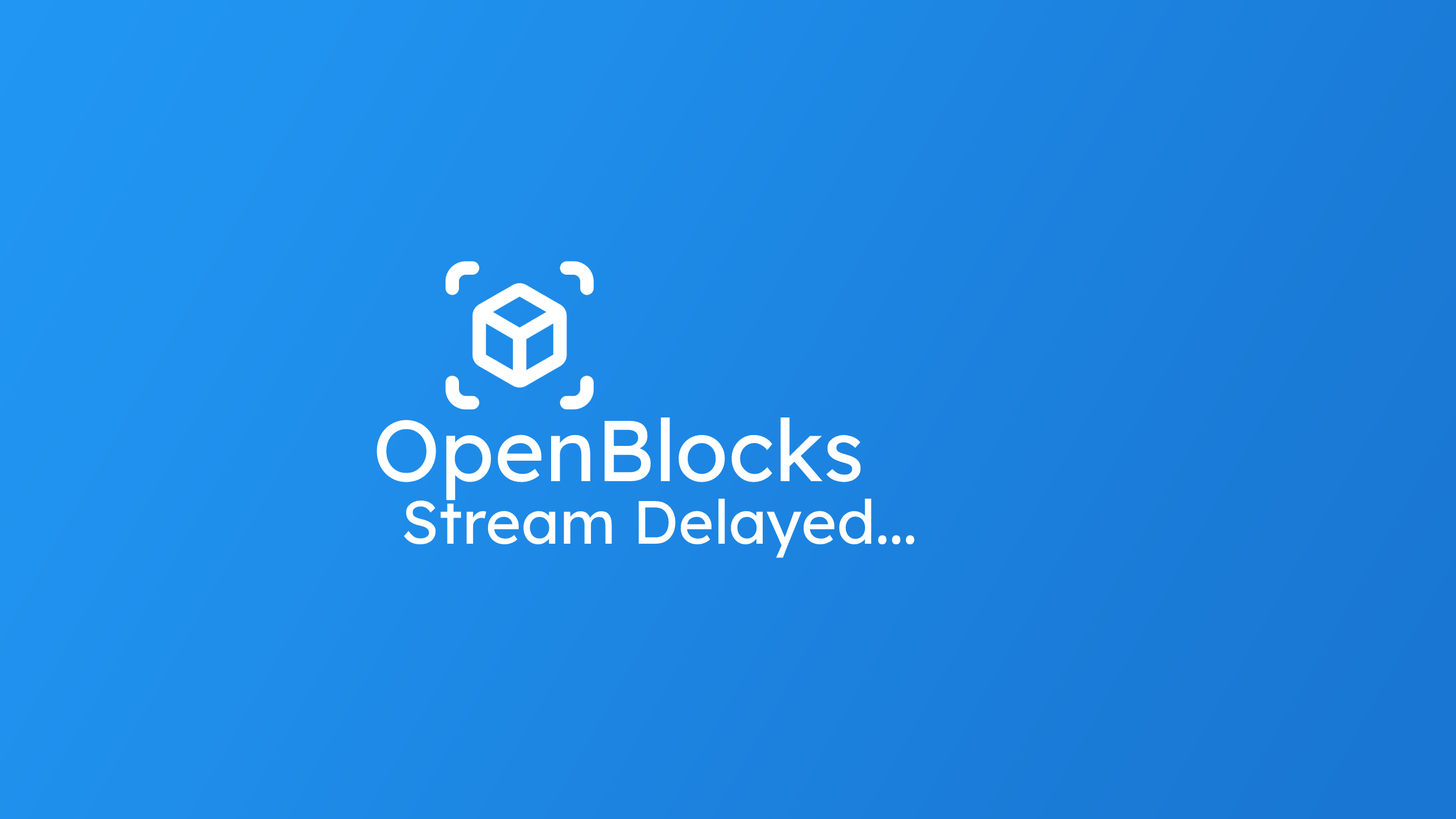
<style>
.page{position:relative;width:1456px;height:819px}
.page>*{position:absolute;margin:0}
.t1{font:86.1px "LexendDeca-Regular";color:#ffffff}
.t2{font:60.9px "LexendDeca-Regular";color:#ffffff}
</style>
<div class="page">
<p class="t1" style="left:377px;top:417px;width:484px;height:83px">OpenBlocks</p>
<p class="t2" style="left:404px;top:498px;width:511px;height:60px">Stream Delayed...</p>
</div>
